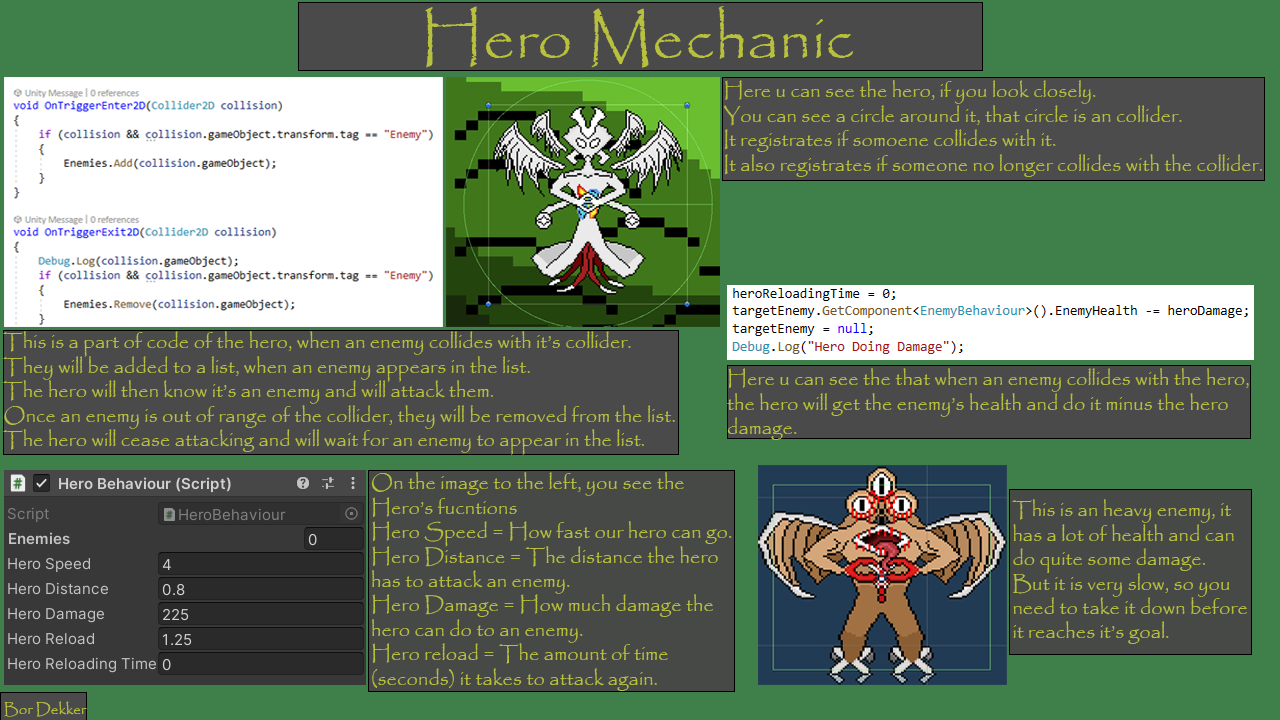
<style>
.page{position:relative;width:1280px;height:720px;background:#3f7f4a}
.page>*{position:absolute;margin:0}
.t1{font:63.5px "Papyrus-Regular";color:#b8c03c}
.t2{font:20.3px "Papyrus-Regular";color:#b8c03c}
.t3{font:15.2px "Papyrus-Regular";color:#b8c03c}
</style>
<div class="page">
<p class="t1" style="left:425px;top:6px;width:428px;height:62px">Hero Mechanic</p>
<p class="t2" style="left:723px;top:80px;width:539px;height:97px">Here u can see the hero, if you look closely.<br>You can see a circle around it, that circle is an collider.<br>It registrates if somoene collides with it.<br>It also registrates if someone no longer collides with the collider.</p>
<p class="t2" style="left:3px;top:331px;width:672px;height:124px">This is a part of code of the hero, when an enemy collides with it’s collider.<br>They will be added to a list, when an enemy appears in the list.<br>The hero will then know it’s an enemy and will attack them.<br>Once an enemy is out of range of the collider, they will be removed from the list.<br>The hero will cease attacking and will wait for an enemy to appear in the list.</p>
<p class="t2" style="left:727px;top:368px;width:522px;height:72px">Here u can see the that when an enemy collides with the hero, the hero will get the enemy’s health and do it minus the hero damage.</p>
<p class="t2" style="left:371px;top:472px;width:361px;height:219px">On the image to the left, you see the Hero’s fucntions<br>Hero Speed = How fast our hero can go.<br>Hero Distance = The distance the hero has to attack an enemy.<br>Hero Damage = How much damage the hero can do to an enemy.<br>Hero reload = The amount of time (seconds) it takes to attack again.</p>
<p class="t2" style="left:1012px;top:499px;width:235px;height:145px">This is an heavy enemy, it<br>has a lot of health and can<br>do quite some damage.<br>But it is very slow, so you<br>need to take it down before<br>it reaches it’s goal.</p>
<p class="t3" style="left:4px;top:701px;width:83px;height:16px">Bor Dekker</p>
</div>
